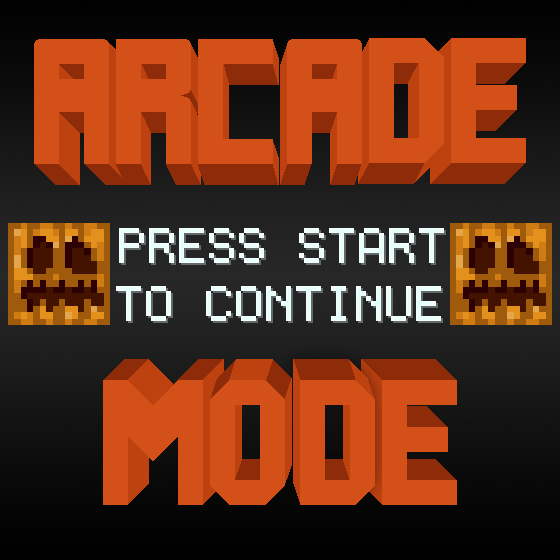
<style>
.page{position:relative;width:560px;height:560px;background:#d35118}
.page>*{position:absolute;margin:0}
.t1{font:40px "Terminal";color:#dbfff5;text-transform:uppercase}
</style>
<div class="page">
<p class="t1" style="left:119px;top:228px;width:325px;height:35px">Press Start</p>
<p class="t1" style="left:116px;top:286px;width:325px;height:35px">To Continue</p>
</div>
